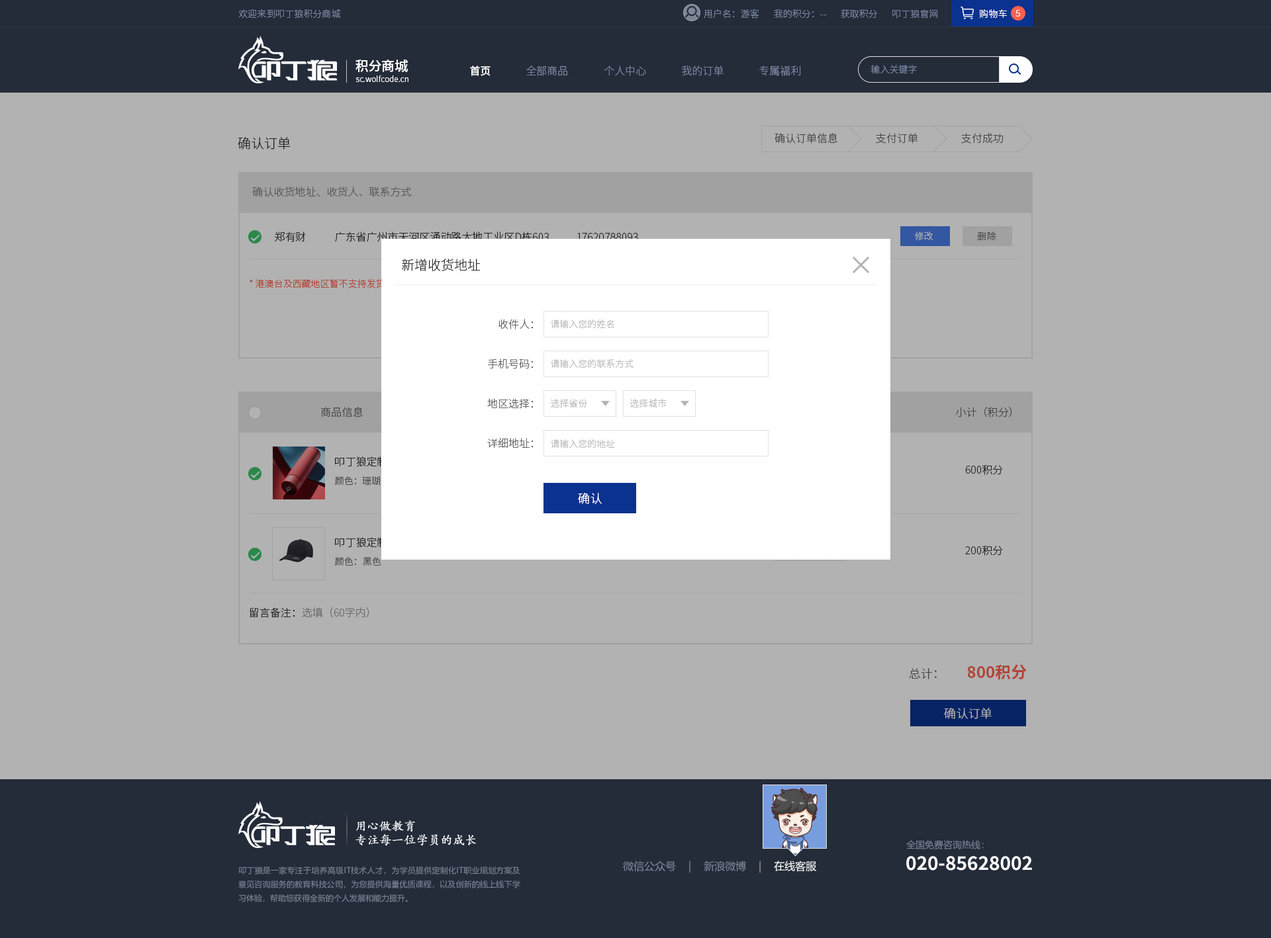
<style>
.page{position:relative;width:1271px;height:938px;background:#b2b2b2}
.page>*{position:absolute;margin:0}
.t1{font:9.3px "SourceHanSansSC-Light";color:#78859f;text-transform:uppercase}
.t2{font:9.3px "SourceHanSansSC-Light";color:#fffefe;text-transform:uppercase}
.t3{font:9.3px "SourceHanSansSC-Light";color:#ffffff;text-transform:uppercase}
.t4{font:13.2px "SourceHanSansSC-Medium";color:#ffffff;text-transform:uppercase}
.t5{font:10.6px "SourceHanSansSC-Light";color:#78859f}
.t6{font:10.6px "SourceHanSansSC-Medium";color:#ffffff}
.t7{font:9.3px "SourceHanSansSC-Light";color:#78859f}
.t8{font:7.9px "SourceHanSansSC-Light";color:#ffffff}
.t9{font:13.2px "SourceHanSansSC-Light";color:#333333}
.t10{font:10.6px "SourceHanSansSC-Light";color:#474747}
.t11{font:10.6px "SourceHanSansSC-Light";color:#5b5b5b}
.t12{font:10.6px "SourceHanSansSC-Light";color:#333333}
.t13{font:9.3px "SourceHanSansSC-Light";color:#b2b2b2}
.t14{font:9.3px "SourceHanSansSC-Light";color:#474747}
.t15{font:9.3px "SourceHanSansSC-Light";color:#b14336}
.t16{font:10.6px "SourceHanSansSC-Light";color:#666666}
.t17{font:9.3px "SourceHanSansSC-Light";color:#bcbcbc}
.t18{font:10.6px "SourceHanSansSC-Light"}
.t19{font:11.9px "SourceHanSansSC-Light";color:#ffffff}
.t20{font:15.9px "SourceHanSansSC-Bold";color:#b14336}
.t21{font:11.9px "SourceHanSansSC-Light";color:#474747}
.t22{font:11.9px "SourceHanSansSC-Light";color:#b2b2b2}
.t23{font:11.9px/13.9px "FZKTK--GBK1-0";color:#ffffff;font-weight:bold}
.t24{font:9.3px "MicrosoftYaHei";color:#7d879a}
.t25{font:18.5px "SourceHanSansSC-Bold";color:#ffffff}
.t26{font:7.9px "MicrosoftYaHei";color:#7d879a}
.t27{font:10.6px "MicrosoftYaHei";color:#7d879a}
.t28{font:10.6px "MicrosoftYaHei";color:#9e9e9e}
.t29{font:10.6px "MicrosoftYaHei";color:#ffffff}
</style>
<div class="page">
<p class="t1" style="left:238px;top:9px;width:103px;height:10px">欢迎来到叩丁狼积分商城</p>
<p class="t1" style="left:703px;top:9px;width:235px;height:10px">用户名：游客       我的积分：--       获取积分       叩丁狼官网</p>
<p class="t2" style="left:979px;top:9px;width:28px;height:10px">购物车</p>
<p class="t3" style="left:1015px;top:10px;width:5px;height:7px">5</p>
<p class="t4" style="left:355px;top:59px;width:53px;height:14px">积分商城</p>
<p class="t5" style="left:470px;top:66px;width:331px;height:10px"><span class="t6">首页 </span>              全部商品               个人中心               我的订单               专属福利</p>
<p class="t7" style="left:870px;top:65px;width:47px;height:9px">输入关键字</p>
<p class="t8" style="left:355px;top:75px;width:53px;height:7px">sc.wolfcode.cn</p>
<p class="t9" style="left:238px;top:137px;width:53px;height:13px">确认订单</p>
<p class="t10" style="left:774px;top:133px;width:63px;height:11px">确认订单信息</p>
<p class="t10" style="left:876px;top:133px;width:42px;height:11px">支付订单</p>
<p class="t10" style="left:961px;top:133px;width:42px;height:11px">支付成功</p>
<p class="t11" style="left:252px;top:187px;width:160px;height:10px">确认收货地址、收货人、联系方式</p>
<p class="t12" style="left:275px;top:232px;width:31px;height:10px">郑有财</p>
<p class="t12" style="left:335px;top:232px;width:214px;height:10px">广东省广州市天河区涌动路大地工业区D栋603</p>
<p class="t12" style="left:577px;top:233px;width:61px;height:8px">17620788093</p>
<p class="t13" style="left:915px;top:232px;width:17px;height:8px">修改</p>
<p class="t14" style="left:977px;top:232px;width:19px;height:8px">删除</p>
<p class="t9" style="left:402px;top:259px;width:78px;height:12px">新增收货地址</p>
<p class="t15" style="left:249px;top:279px;width:136px;height:10px">* 港澳台及西藏地区暂不支持发货</p>
<p class="t16" style="left:498px;top:319px;width:35px;height:11px">收件人：</p>
<p class="t17" style="left:550px;top:320px;width:64px;height:9px">请输入您的姓名</p>
<p class="t16" style="left:488px;top:359px;width:45px;height:10px">手机号码：</p>
<p class="t17" style="left:550px;top:359px;width:83px;height:10px">请输入您的联系方式</p>
<p class="t16" style="left:487px;top:398px;width:46px;height:11px">地区选择：</p>
<p class="t17" style="left:551px;top:399px;width:36px;height:9px">选择省份</p>
<p class="t17" style="left:630px;top:398px;width:36px;height:10px">选择城市</p>
<p class="t10" style="left:321px;top:407px;width:42px;height:11px">商品信息</p>
<p class="t10" style="left:956px;top:407px;width:56px;height:11px">小计（积分）</p>
<p class="t16" style="left:487px;top:438px;width:46px;height:10px">详细地址：</p>
<p class="t17" style="left:550px;top:439px;width:65px;height:10px">请输入您的地址</p>
<p class="t18" style="left:335px;top:457px;width:95px;height:10px">叩丁狼定制保温水杯</p>
<p class="t12" style="left:965px;top:465px;width:38px;height:10px">600积分</p>
<p class="t14" style="left:335px;top:476px;width:55px;height:10px">颜色：珊瑚粉</p>
<p class="t19" style="left:578px;top:493px;width:24px;height:11px">确认</p>
<p class="t18" style="left:335px;top:537px;width:83px;height:11px">叩丁狼定制鸭舌帽</p>
<p class="t12" style="left:965px;top:546px;width:38px;height:10px">200积分</p>
<p class="t14" style="left:335px;top:557px;width:46px;height:10px">颜色：黑色</p>
<p class="t18" style="left:249px;top:608px;width:120px;height:10px">留言备注：选填（60字内）</p>
<p class="t20" style="left:968px;top:664px;width:58px;height:16px">800积分</p>
<p class="t21" style="left:909px;top:668px;width:27px;height:12px">总计：</p>
<p class="t22" style="left:944px;top:708px;width:47px;height:11px">确认订单</p>
<p class="t23" style="left:355px;top:821px;width:121px;height:25px">用心做教育<br>专注每一位学员的成长</p>
<p class="t24" style="left:906px;top:840px;width:77px;height:10px">全国免费咨询热线：</p>
<p class="t25" style="left:906px;top:856px;width:126px;height:15px">020-85628002</p>
<p class="t26" style="left:238px;top:866px;width:282px;height:37px;text-align:justify">叩丁狼是一家专注于培养高级IT技术人才，为学员提供定制化IT职业规划方案及意见咨询服务的教育科技公司，为您提供海量优质课程，以及创新的线上线下学习体验，帮助您获得全新的个人发展和能力提升。</p>
<p class="t27" style="left:623px;top:861px;width:194px;height:13px">微信公众号    |    新浪微博  <span class="t28">  |    </span><span class="t29">在线客服</span></p>
</div>
